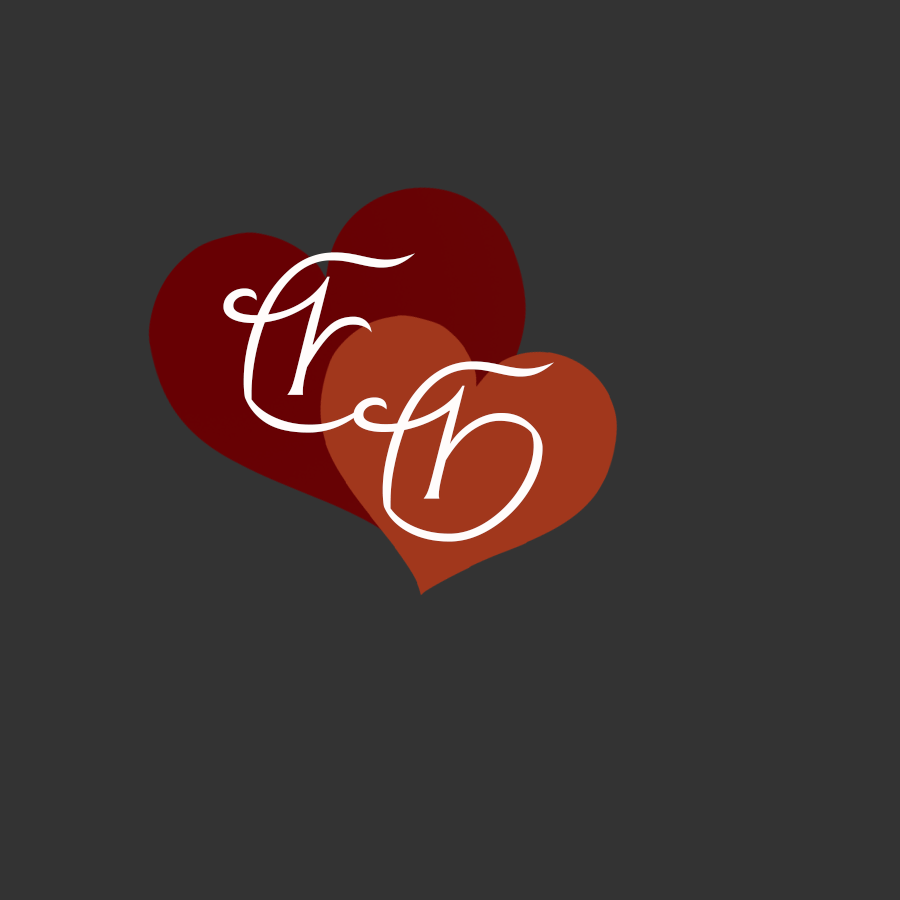
<style>
.page{position:relative;width:900px;height:900px;background:#333333}
.page>*{position:absolute;margin:0}
.t1{font:250px "Srisakdi-Regular";color:#fffcfb}
</style>
<div class="page">
<p class="t1" style="left:223px;top:252px;width:192px;height:181px">E</p>
<p class="t1" style="left:353px;top:361px;width:201px;height:181px">G</p>
</div>
